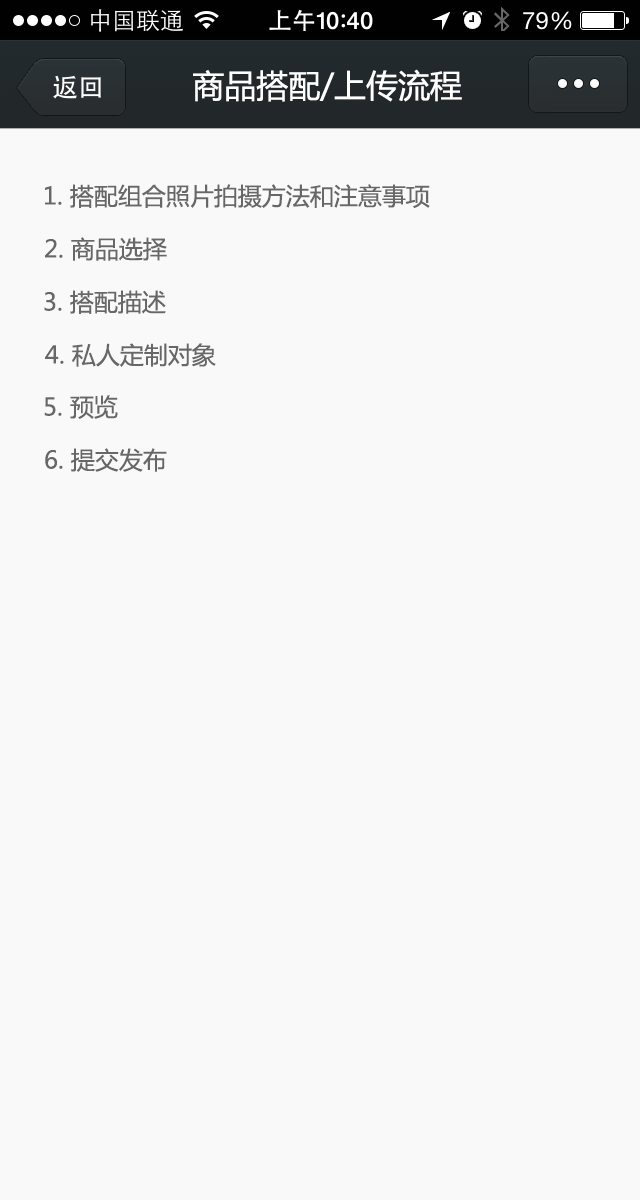
<style>
.page{position:relative;width:640px;height:1200px;background:#faf9f9}
.page>*{position:absolute;margin:0}
.t1{font:32px "MicrosoftYaHei";color:#ffffff}
.t2{font:24px "MicrosoftYaHei";color:#676767}
</style>
<div class="page">
<p class="t1" style="left:193px;top:69px;width:269px;height:33px">商品搭配/上传流程</p>
<p class="t2" style="left:45px;top:184px;width:385px;height:24px">1. 搭配组合照片拍摄方法和注意事项</p>
<p class="t2" style="left:45px;top:237px;width:122px;height:24px">2. 商品选择</p>
<p class="t2" style="left:44px;top:290px;width:122px;height:24px">3. 搭配描述</p>
<p class="t2" style="left:45px;top:343px;width:171px;height:24px">4. 私人定制对象</p>
<p class="t2" style="left:44px;top:395px;width:74px;height:24px">5. 预览</p>
<p class="t2" style="left:45px;top:448px;width:122px;height:24px">6. 提交发布</p>
</div>
